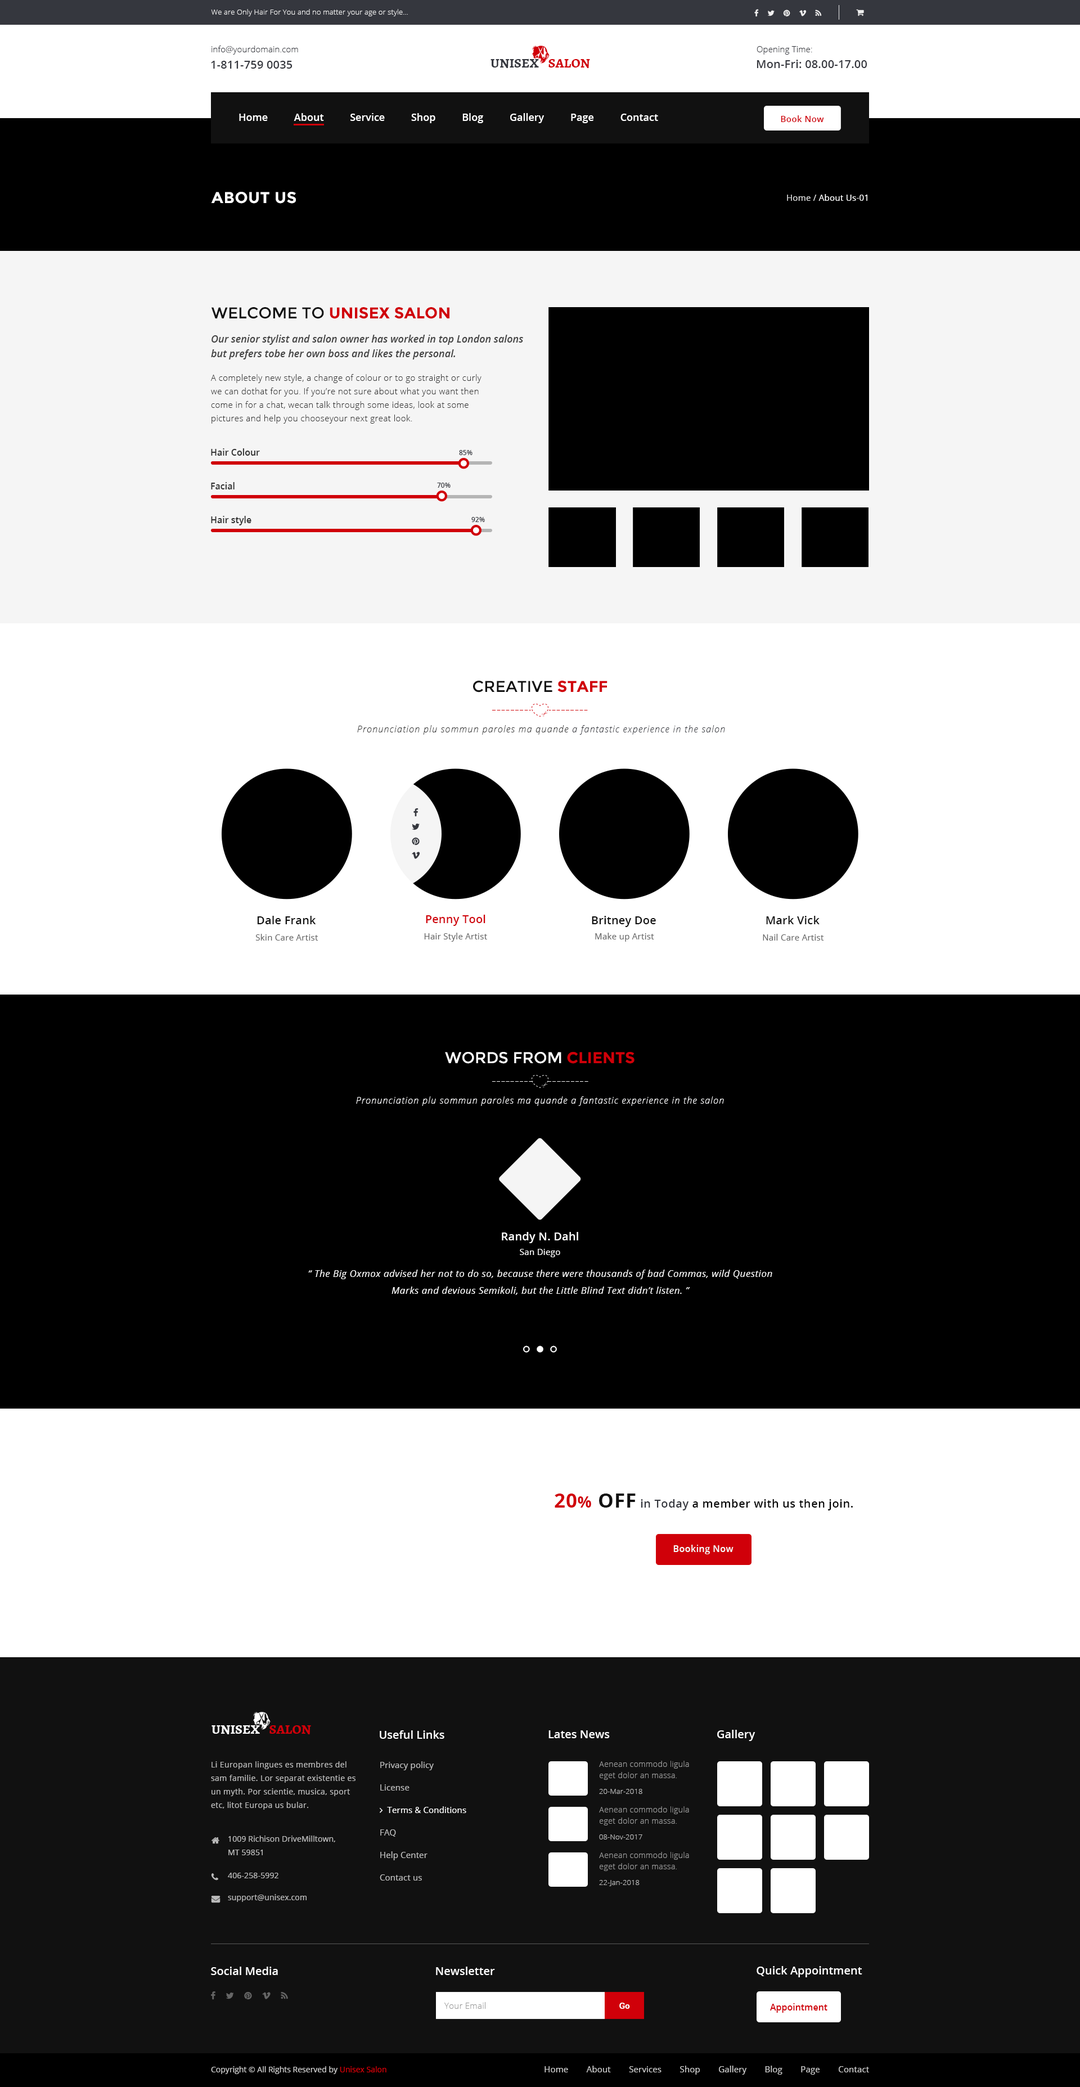
<style>
.page{position:relative;width:1080px;height:2087px;background:#ffffff}
.page>*{position:absolute;margin:0}
.t1{font:7.3px "OpenSans-Light";letter-spacing:0.01em;color:#efefef}
.t2{font:8.4px "OpenSans-Light";letter-spacing:0.01em;color:#35373e}
.t3{font:11.2px "OpenSans-Semibold";letter-spacing:0.01em;color:#35373e}
.t4{font:13.5px "Alegreya-Bold";color:#35373e;text-transform:uppercase}
.t5{font:13.5px "Alegreya-Bold";color:#d00009;text-transform:uppercase}
.t6{font:10.1px "OpenSans-Semibold";color:#ffffff}
.t7{font:8.4px "OpenSans-Semibold";letter-spacing:0.03em;color:#d00009}
.t8{font:15.8px "Montserrat-Bold";letter-spacing:0.02em;color:#ffffff;text-transform:uppercase}
.t9{font:8.4px "OpenSans";letter-spacing:0.02em;color:#ffffff}
.t10{font:8.4px "OpenSans";letter-spacing:0.02em;color:#dddddd}
.t11{font:15.8px "Montserrat-Bold";color:#d00009;text-transform:uppercase}
.t12{font:15.8px "Montserrat-Regular";color:#111111;text-transform:uppercase}
.t13{font:10.1px/14.3px "OpenSans-SemiboldItalic";color:#444444}
.t14{font:8.4px/13.5px "OpenSans-Light";letter-spacing:0.03em;color:#333333}
.t15{font:9px "OpenSans-Semibold";color:#333333}
.t16{font:6.8px "OpenSans-Semibold";color:#35373e}
.t17{font:14.3px "OpenSans-Light";color:#d00009;text-transform:uppercase}
.t18{font:9px "OpenSansLight-Italic";letter-spacing:0.08em;color:#333333}
.t19{font:9px "OpenSansLight-Italic";letter-spacing:0.08em;color:#35373e}
.t20{font:11.2px "OpenSans-Semibold";letter-spacing:0.01em;color:#111111}
.t21{font:11.2px "OpenSans-Semibold";letter-spacing:0.01em;color:#d00009}
.t22{font:8.4px "OpenSans";letter-spacing:0.02em;color:#666666}
.t23{font:15.8px "Montserrat-Regular";color:#ffffff;text-transform:uppercase}
.t24{font:14.3px "OpenSans-Light";color:#ffffff;text-transform:uppercase}
.t25{font:9px "OpenSansLight-Italic";letter-spacing:0.08em;color:#fefeff}
.t26{font:11.2px "OpenSans-Semibold";letter-spacing:0.01em;color:#ffffff}
.t27{font:9.6px/16.9px "OpenSans-Italic";letter-spacing:0.03em;color:#ffffff}
.t28{font:11.2px "OpenSans-Semibold";letter-spacing:0.03em;color:#000000}
.t29{font:19.7px "OpenSans-Bold";letter-spacing:0.03em;color:#d00009}
.t30{font:15.8px "OpenSans-Bold";letter-spacing:0.03em;color:#d00009}
.t31{font:19.7px "OpenSans-Bold";letter-spacing:0.03em;color:#111111;text-transform:uppercase}
.t32{font:11.2px "OpenSans-Semibold";letter-spacing:0.03em;color:#35373e}
.t33{font:9px "OpenSans-Semibold";letter-spacing:0.03em;color:#f5f5f5}
.t34{font:13.5px "Alegreya-Bold";color:#ffffff;text-transform:uppercase}
.t35{font:11.2px "OpenSans-Semibold";color:#ffffff}
.t36{font:7.9px/13.5px "OpenSans";letter-spacing:0.03em;color:#bbbbbb}
.t37{font:7.9px/11.2px "OpenSans-Light";letter-spacing:0.03em;color:#999999}
.t38{font:7.3px "OpenSans-Light";letter-spacing:0.01em;color:#bbbbbb}
.t39{font:7.9px/13.5px "OpenSans";letter-spacing:0.01em;color:#bbbbbb}
.t40{font:7.9px "OpenSans";letter-spacing:0.01em;color:#bbbbbb}
.t41{font:8.4px "OpenSans-Light";letter-spacing:0.02em;color:#999999}
.t42{font:8.4px "RobotoSlab-Bold";letter-spacing:0.02em;color:#ffffff}
.t43{font:9px "OpenSans-Semibold";color:#d00009}
.t44{font:7.9px "OpenSans";color:#cccccc}
.t45{font:7.9px "OpenSans";color:#d00009}
.t46{font:8.4px "OpenSans";letter-spacing:0.01em;color:#cccccc}
</style>
<div class="page">
<p class="t1" style="left:211px;top:9px;width:197px;height:7px">We are Only Hair For You and no matter your age or style...</p>
<p class="t2" style="left:212px;top:46px;width:86px;height:9px">info@yourdomain.com</p>
<p class="t2" style="left:757px;top:46px;width:55px;height:9px">Opening Time:</p>
<p class="t3" style="left:211px;top:61px;width:81px;height:8px">1-811-759 0035</p>
<p class="t4" style="left:490px;top:58px;width:100px;height:10px">Unisex    <span class="t5">Salon</span></p>
<p class="t3" style="left:757px;top:60px;width:110px;height:8px">Mon-Fri: 08.00-17.00</p>
<p class="t6" style="left:239px;top:113px;width:419px;height:10px">Home          About          Service          Shop          Blog          Gallery          Page          Contact</p>
<p class="t7" style="left:781px;top:115px;width:43px;height:7px">Book Now</p>
<p class="t8" style="left:211px;top:192px;width:85px;height:12px">About us</p>
<p class="t9" style="left:787px;top:194px;width:80px;height:7px"><span class="t10">Home / </span>About Us-01</p>
<p class="t11" style="left:211px;top:307px;width:238px;height:12px"><span class="t12">Welcome to </span>Unisex Salon</p>
<p class="t13" style="left:211px;top:335px;width:312px;height:24px">Our senior stylist and salon owner has worked in top London salons but prefers tobe her own boss and likes the personal.</p>
<p class="t14" style="left:211px;top:374px;width:271px;height:50px">A completely new style, a change of colour or to go straight or curly we can dothat for you. If you’re not sure about what you want then come in for a chat, wecan talk through some ideas, look at some pictures and help you chooseyour next great look.</p>
<p class="t15" style="left:211px;top:448px;width:49px;height:8px">Hair Colour</p>
<p class="t16" style="left:459px;top:450px;width:13px;height:5px">85%</p>
<p class="t15" style="left:211px;top:482px;width:24px;height:7px">Facial</p>
<p class="t16" style="left:437px;top:483px;width:14px;height:5px">70%</p>
<p class="t15" style="left:211px;top:516px;width:40px;height:9px">Hair style</p>
<p class="t16" style="left:471px;top:517px;width:14px;height:5px">92%</p>
<p class="t12" style="left:473px;top:681px;width:135px;height:11px">Creative <span class="t11">staff</span></p>
<p class="t17" style="left:492px;top:710px;width:96px;height:0px">---------------------</p>
<p class="t18" style="left:357px;top:725px;width:368px;height:10px">Pronunciation plu sommun paroles ma quande<span class="t19"> a fantastic experience in the salon</span></p>
<p class="t20" style="left:257px;top:916px;width:59px;height:8px">Dale Frank</p>
<p class="t21" style="left:426px;top:915px;width:59px;height:11px">Penny Tool</p>
<p class="t20" style="left:592px;top:916px;width:64px;height:11px">Britney Doe</p>
<p class="t20" style="left:766px;top:916px;width:54px;height:8px">Mark Vick</p>
<p class="t22" style="left:255px;top:934px;width:63px;height:6px">Skin Care Artist</p>
<p class="t22" style="left:424px;top:933px;width:63px;height:9px">Hair Style Artist</p>
<p class="t22" style="left:595px;top:933px;width:59px;height:9px">Make up Artist</p>
<p class="t22" style="left:763px;top:934px;width:61px;height:6px">Nail Care Artist</p>
<p class="t23" style="left:445px;top:1052px;width:189px;height:12px">Words From <span class="t11">Clients</span></p>
<p class="t24" style="left:492px;top:1081px;width:41px;height:1px">---------</p>
<p class="t24" style="left:548px;top:1081px;width:40px;height:1px">---------</p>
<p class="t25" style="left:356px;top:1096px;width:368px;height:10px">Pronunciation plu sommun paroles ma quande a fantastic experience in the salon</p>
<p class="t26" style="left:502px;top:1232px;width:76px;height:11px">Randy N. Dahl</p>
<p class="t9" style="left:520px;top:1249px;width:40px;height:8px">San Diego</p>
<p class="t27" style="left:308px;top:1270px;width:464px;height:25px;text-align:center">“ The Big Oxmox advised her not to do so, because there were thousands of bad Commas, wild Question Marks and devious Semikoli, but the Little Blind Text didn’t listen. ”</p>
<p class="t28" style="left:555px;top:1493px;width:298px;height:17px"><span class="t29">20</span><span class="t30">% </span><span class="t31">off</span><span class="t32"> in Today </span>a member with us then join.</p>
<p class="t33" style="left:673px;top:1545px;width:61px;height:9px">Booking Now</p>
<p class="t34" style="left:212px;top:1725px;width:99px;height:9px">Unisex    <span class="t5">Salon</span></p>
<p class="t35" style="left:380px;top:1730px;width:64px;height:9px">Useful Links</p>
<p class="t35" style="left:548px;top:1730px;width:62px;height:8px">Lates News</p>
<p class="t35" style="left:717px;top:1730px;width:38px;height:11px">Gallery</p>
<p class="t36" style="left:211px;top:1761px;width:145px;height:49px">Li Europan lingues es membres del sam familie. Lor separat existentie es un myth. Por scientie, musica, sport etc, litot Europa us bular.</p>
<p class="t37" style="left:599px;top:1761px;width:90px;height:19px">Aenean commodo ligula eget dolor an massa.</p>
<p class="t38" style="left:599px;top:1789px;width:43px;height:5px">20-Mar-2018</p>
<p class="t37" style="left:599px;top:1806px;width:90px;height:19px">Aenean commodo ligula eget dolor an massa.</p>
<p class="t39" style="left:228px;top:1835px;width:107px;height:20px">1009 Richison DriveMilltown, <br>MT 59851</p>
<p class="t38" style="left:599px;top:1834px;width:43px;height:5px">08-Nov-2017</p>
<p class="t37" style="left:599px;top:1852px;width:90px;height:19px">Aenean commodo ligula eget dolor an massa.</p>
<p class="t40" style="left:228px;top:1873px;width:50px;height:5px">406-258-5992</p>
<p class="t38" style="left:599px;top:1880px;width:41px;height:6px">22-Jan-2018</p>
<p class="t40" style="left:228px;top:1894px;width:79px;height:8px">support@unisex.com</p>
<p class="t35" style="left:211px;top:1966px;width:67px;height:9px">Social Media</p>
<p class="t35" style="left:436px;top:1966px;width:59px;height:9px">Newsletter</p>
<p class="t35" style="left:757px;top:1966px;width:105px;height:11px">Quick Appointment</p>
<p class="t41" style="left:444px;top:2002px;width:41px;height:7px">Your Email</p>
<p class="t42" style="left:619px;top:2002px;width:11px;height:7px">Go</p>
<p class="t43" style="left:770px;top:2003px;width:57px;height:10px">Appointment</p>
<p class="t44" style="left:211px;top:2066px;width:175px;height:8px">Copyright © All Rights Reserved by <span class="t45">Unisex Salon</span></p>
<p class="t46" style="left:544px;top:2066px;width:325px;height:8px">Home        About        Services        Shop        Gallery        Blog        Page        Contact</p>
</div>
